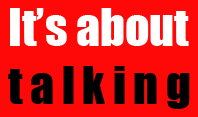
<style>
.page{position:relative;width:198px;height:117px;background:#ff0808}
.page>*{position:absolute;margin:0}
.t1{font:48px "Impact";color:#ffffff}
.t2{font:48px "Impact";letter-spacing:0.155em;color:#000000}
</style>
<div class="page">
<p class="t1" style="left:8px;top:8px;width:182px;height:101px">It’s about<br><span class="t2">talking</span></p>
</div>
